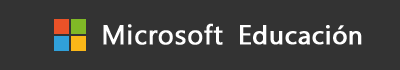
<style>
.page{position:relative;width:400px;height:70px;background:#333333}
.page>*{position:absolute;margin:0}
.t1{font:27px "SegoeUI";letter-spacing:0.01em;color:#ffffff;font-weight:bold}
.t2{font:27px "MyriadPro-Regular";letter-spacing:0.01em;color:#ffffff;font-weight:bold}
</style>
<div class="page">
<p class="t1" style="left:103px;top:23px;width:120px;height:22px">Microsoft</p>
<p class="t2" style="left:240px;top:25px;width:122px;height:20px">Educación</p>
</div>
